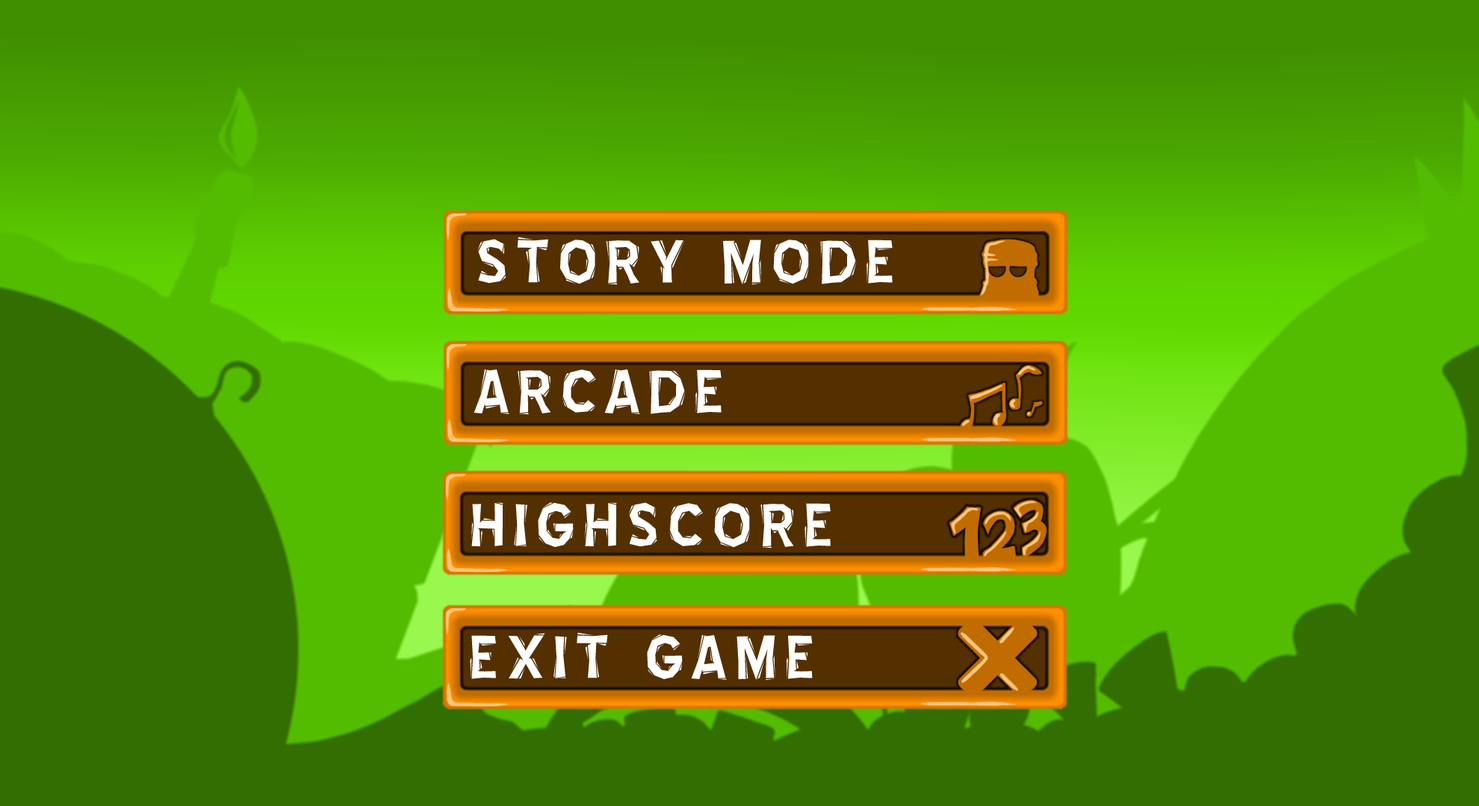
<style>
.page{position:relative;width:1479px;height:806px;background:#326e01}
.page>*{position:absolute;margin:0}
.t1{font:74.7px "BlueHighwayLinocut";letter-spacing:0.1em;color:#ffffff}
</style>
<div class="page">
<p class="t1" style="left:477px;top:237px;width:415px;height:48px">STORY MODE</p>
<p class="t1" style="left:473px;top:369px;width:248px;height:46px">ARCADE</p>
<p class="t1" style="left:471px;top:503px;width:359px;height:46px">HIGHSCORE</p>
<p class="t1" style="left:470px;top:632px;width:342px;height:49px">EXIT GAME</p>
</div>
